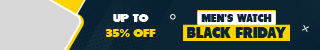
<style>
.page{position:relative;width:320px;height:50px;background:#0c2536}
.page>*{position:absolute;margin:0}
.t1{font:12.4px/15.7px "Tondu-Beta";color:#ffd200}
.t2{font:12.4px/15.7px "Tondu-Beta";color:#ffffff}
.t3{font:11px "Tondu-Beta";color:#0c2536}
.t4{font:14.8px "Tondu-Beta";color:#0c2536}
</style>
<div class="page">
<p class="t1" style="left:106px;top:14px;width:50px;height:23px;text-align:center"><span class="t2">UP TO<br></span>35% OFF</p>
<p class="t3" style="left:201px;top:14px;width:71px;height:8px">MEN’S WATCH</p>
<p class="t4" style="left:187px;top:27px;width:99px;height:11px">BLACK FRIDAY</p>
</div>
